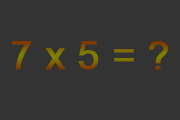
<style>
.page{position:relative;width:180px;height:120px;background:#333333}
.page>*{position:absolute;margin:0}
.t1{font:38.9px "ArialMT";font-weight:bold}
</style>
<div class="page">
<p class="t1" style="left:11px;top:41px;width:157px;height:29px">7 x 5 = ?</p>
</div>
